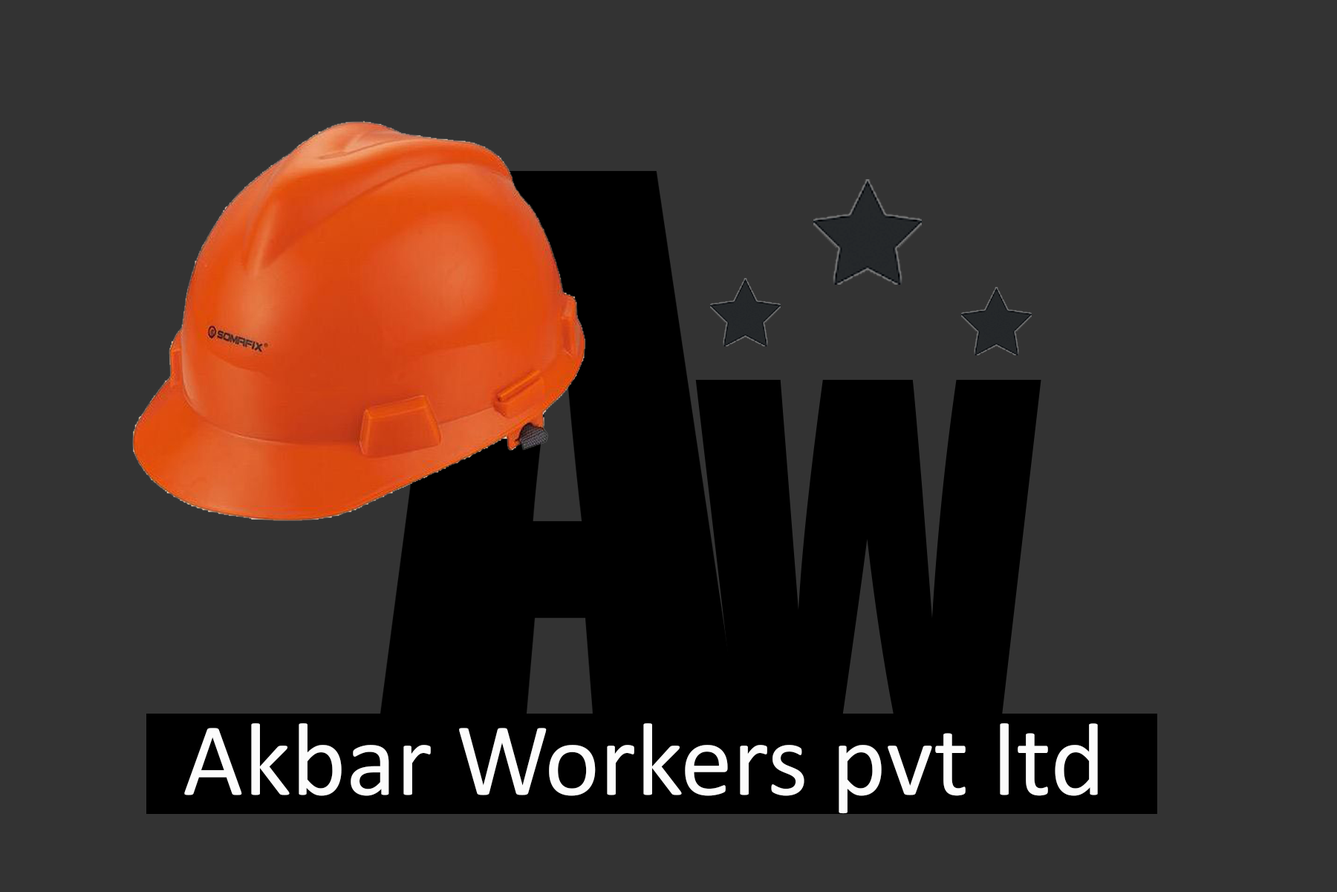
<style>
.page{position:relative;width:1337px;height:892px;background:#333333}
.page>*{position:absolute;margin:0}
.t1{font:423.5px "Impact";color:#000000}
.t2{font:104.9px "Calibri";color:#fcfcfc}
</style>
<div class="page">
<p class="t1" style="left:695px;top:380px;width:347px;height:335px">W</p>
<p class="t2" style="left:184px;top:723px;width:914px;height:91px">Akbar Workers pvt ltd</p>
</div>
